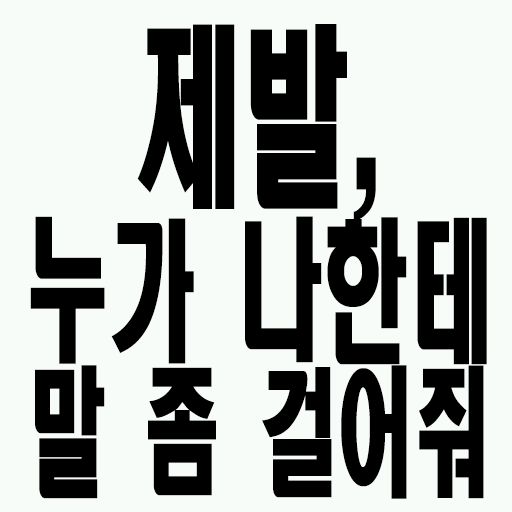
<style>
.page{position:relative;width:512px;height:512px;background:#f8fcf8}
.page>*{position:absolute;margin:0}
.t1{font:192.6px "HeadlineR-HM";color:#000000;scale:0.56 1}
.t2{font:153px "HeadlineR-HM";color:#000000;scale:0.56 1}
.t3{font:138.6px "HeadlineR-HM";color:#000000;scale:0.56 1}
</style>
<div class="page">
<p class="t1" style="left:137px;top:24px;width:239px;height:197px">제발,</p>
<p class="t2" style="left:30px;top:216px;width:457px;height:149px">누가 나한테</p>
<p class="t3" style="left:35px;top:365px;width:449px;height:134px">말 좀 걸어줘</p>
</div>
